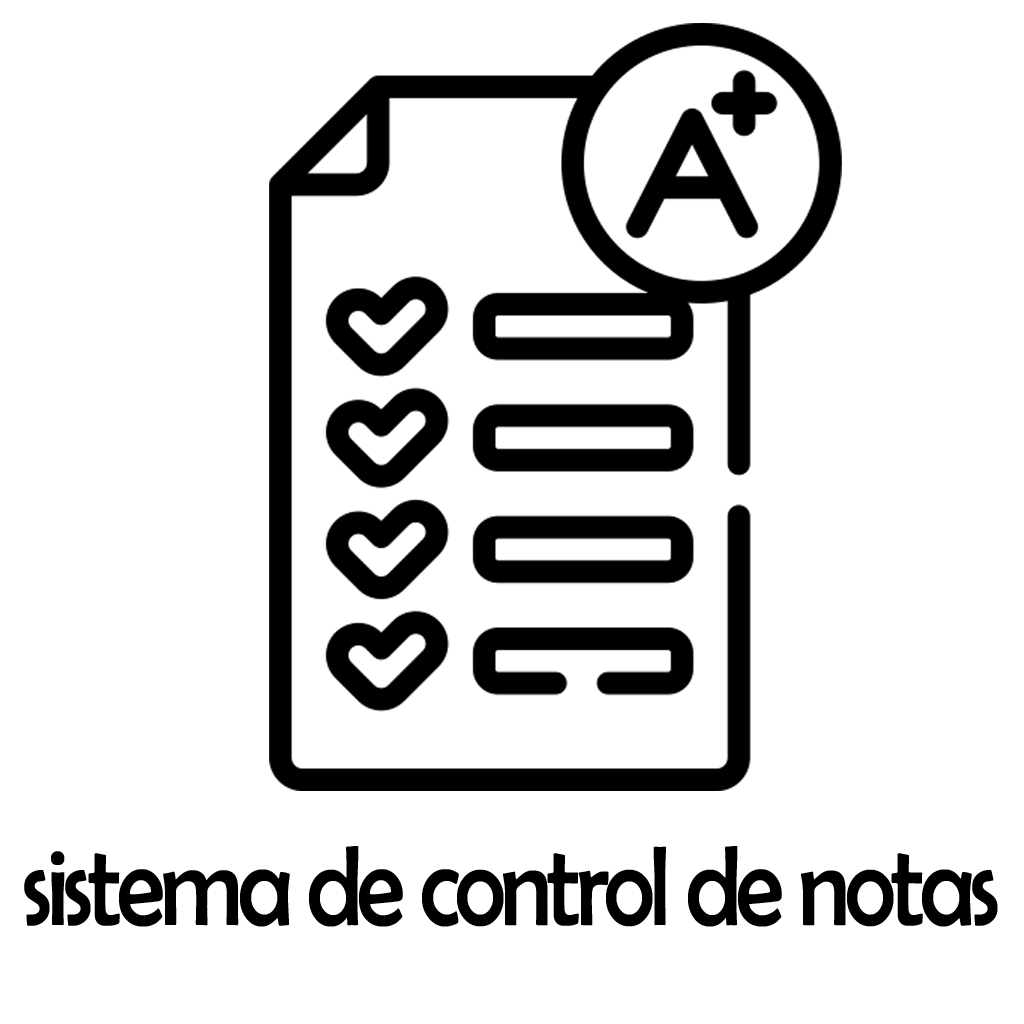
<style>
.page{position:relative;width:1024px;height:1024px;background:#ffffff}
.page>*{position:absolute;margin:0}
.t1{font:114.2px "BerlinSansFB-Reg";letter-spacing:-0.05em;color:#000000;scale:0.87 1}
</style>
<div class="page">
<p class="t1" style="left:24px;top:846px;width:974px;height:81px">sistema de control de notas</p>
</div>
